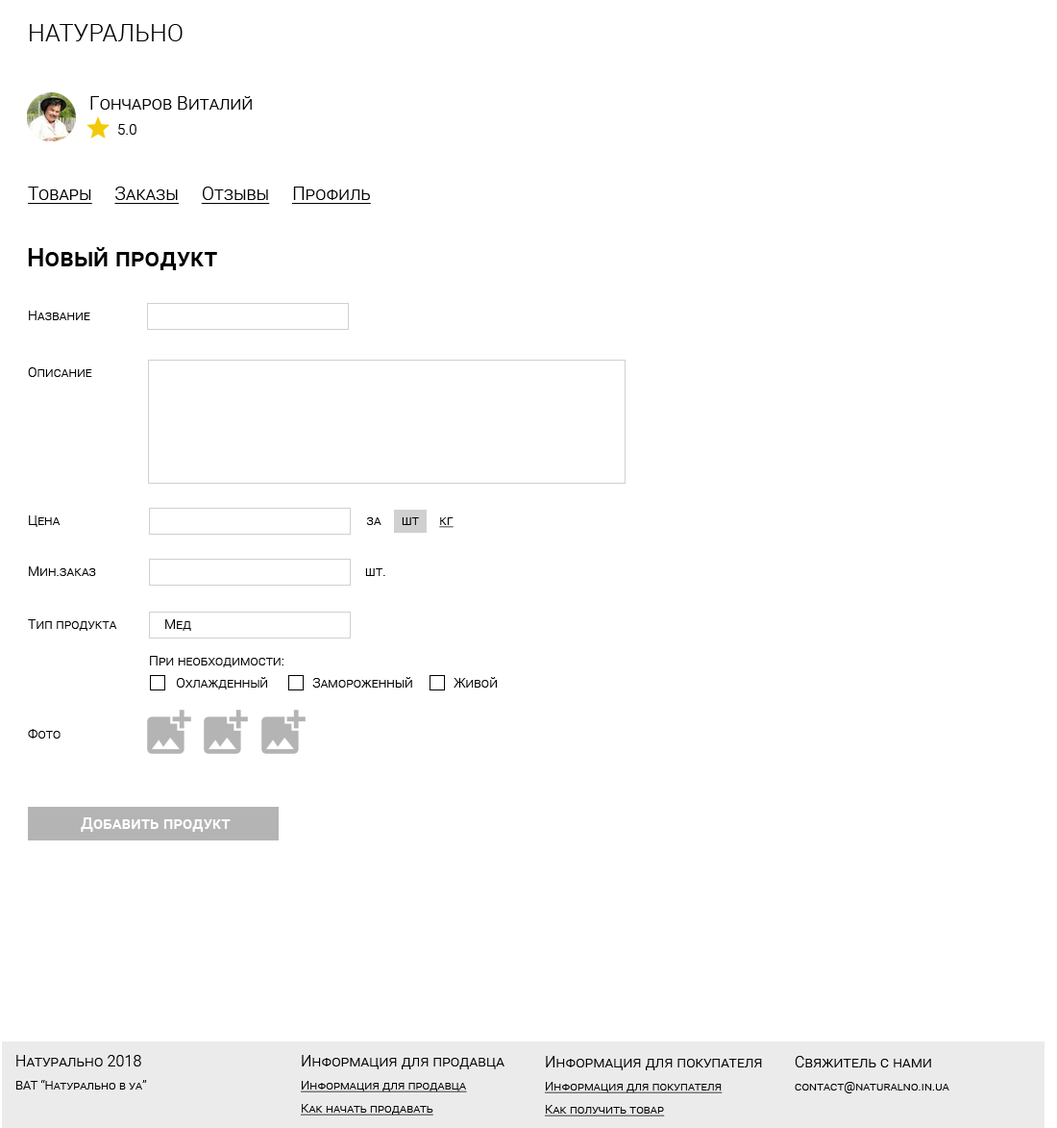
<style>
.page{position:relative;width:1057px;height:1128px;background:#ffffff}
.page>*{position:absolute;margin:0}
.t1{font:24px "Roboto-Light";letter-spacing:0.01em;color:#000000;font-variant:small-caps}
.t2{font:18.3px "Roboto-Light";letter-spacing:0.01em;color:#000000;font-variant:small-caps}
.t3{font:14.4px "Roboto-Light";letter-spacing:0.01em;color:#000000;font-variant:small-caps}
.t4{font:18.3px "Roboto-Light";letter-spacing:0.01em;color:#000000;font-variant:small-caps;text-decoration:underline}
.t5{font:25px "Roboto-Medium";letter-spacing:0.01em;color:#000000;font-variant:small-caps}
.t6{font:13.5px "Roboto-Light";letter-spacing:0.01em;color:#000000;font-variant:small-caps}
.t7{font:13.5px "Roboto-Light";letter-spacing:0.01em;color:#000000;font-variant:small-caps;text-decoration:underline}
.t8{font:13.5px/22.1px "Roboto-Light";letter-spacing:0.01em;color:#000000;font-variant:small-caps}
.t9{font:13.5px/15.4px "Roboto-Light";letter-spacing:0.01em;color:#000000;font-variant:small-caps}
.t10{font:16.3px "Roboto-Medium";letter-spacing:0.01em;color:#ffffff;font-variant:small-caps}
.t11{font:12.5px/23.1px "Roboto-Light";letter-spacing:0.01em;color:#000000;font-variant:small-caps}
.t12{font:15.4px/25px "Roboto-Light";letter-spacing:0.01em;color:#000000;font-variant:small-caps}
.t13{font:12.5px/23.1px "Roboto-Light";letter-spacing:0.01em;color:#000000;font-variant:small-caps;text-decoration:underline}
</style>
<div class="page">
<p class="t1" style="left:30px;top:24px;width:153px;height:17px">НАТУРАЛЬНО</p>
<p class="t2" style="left:90px;top:96px;width:162px;height:14px">Гончаров Виталий</p>
<p class="t3" style="left:118px;top:124px;width:19px;height:11px">5.0</p>
<p class="t4" style="left:28px;top:186px;width:343px;height:18px">Товары     Заказы     Отзывы     Профиль</p>
<p class="t5" style="left:28px;top:247px;width:189px;height:23px">Новый продукт</p>
<p class="t6" style="left:29px;top:311px;width:61px;height:9px">Название</p>
<p class="t6" style="left:28px;top:367px;width:64px;height:10px">Описание</p>
<p class="t6" style="left:29px;top:515px;width:425px;height:13px">Цена                                                                                          за      шт      <span class="t7">кг</span></p>
<p class="t6" style="left:29px;top:566px;width:356px;height:10px">Мин.заказ                                                                               шт.</p>
<p class="t6" style="left:28px;top:619px;width:163px;height:12px">Тип продукта              Мед</p>
<p class="t8" style="left:150px;top:656px;width:347px;height:33px"><span class="t9">При необходимости:<br></span>        Охлажденный             Замороженный            Живой</p>
<p class="t6" style="left:28px;top:729px;width:33px;height:9px">Фото</p>
<p class="t10" style="left:81px;top:817px;width:150px;height:15px">Добавить продукт</p>
<p class="t11" style="left:16px;top:1055px;width:131px;height:34px"><span class="t12">Натурально 2018<br></span>ВАТ “Натурально в уа”</p>
<p class="t13" style="left:301px;top:1055px;width:204px;height:60px"><span class="t12">Информация для продавца<br></span>Информация для продавца<br>Как начать продавать</p>
<p class="t13" style="left:545px;top:1056px;width:217px;height:60px"><span class="t12">Информация для покупателя<br></span>Информация для покупателя<br>Как получить товар</p>
<p class="t11" style="left:795px;top:1056px;width:155px;height:37px"><span class="t12">Свяжитель с нами<br></span>contact@naturalno.in.ua</p>
</div>
